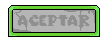
<style>
.page{position:relative;width:109px;height:43px;background:#ffffff}
.page>*{position:absolute;margin:0}
.t1{font:12.1px "SuperPixel";color:#8f8f8f}
</style>
<div class="page">
<p class="t1" style="left:17px;top:15px;width:73px;height:11px">Aceptar</p>
</div>
